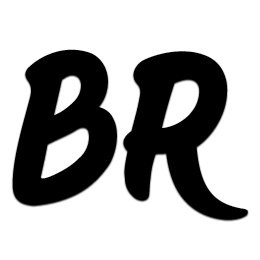
<style>
.page{position:relative;width:260px;height:260px;background:#ffffff}
.page>*{position:absolute;margin:0}
.t1{font:200px "KestoySelfie";color:#000000}
</style>
<div class="page">
<p class="t1" style="left:12px;top:49px;width:236px;height:171px">BR</p>
</div>
